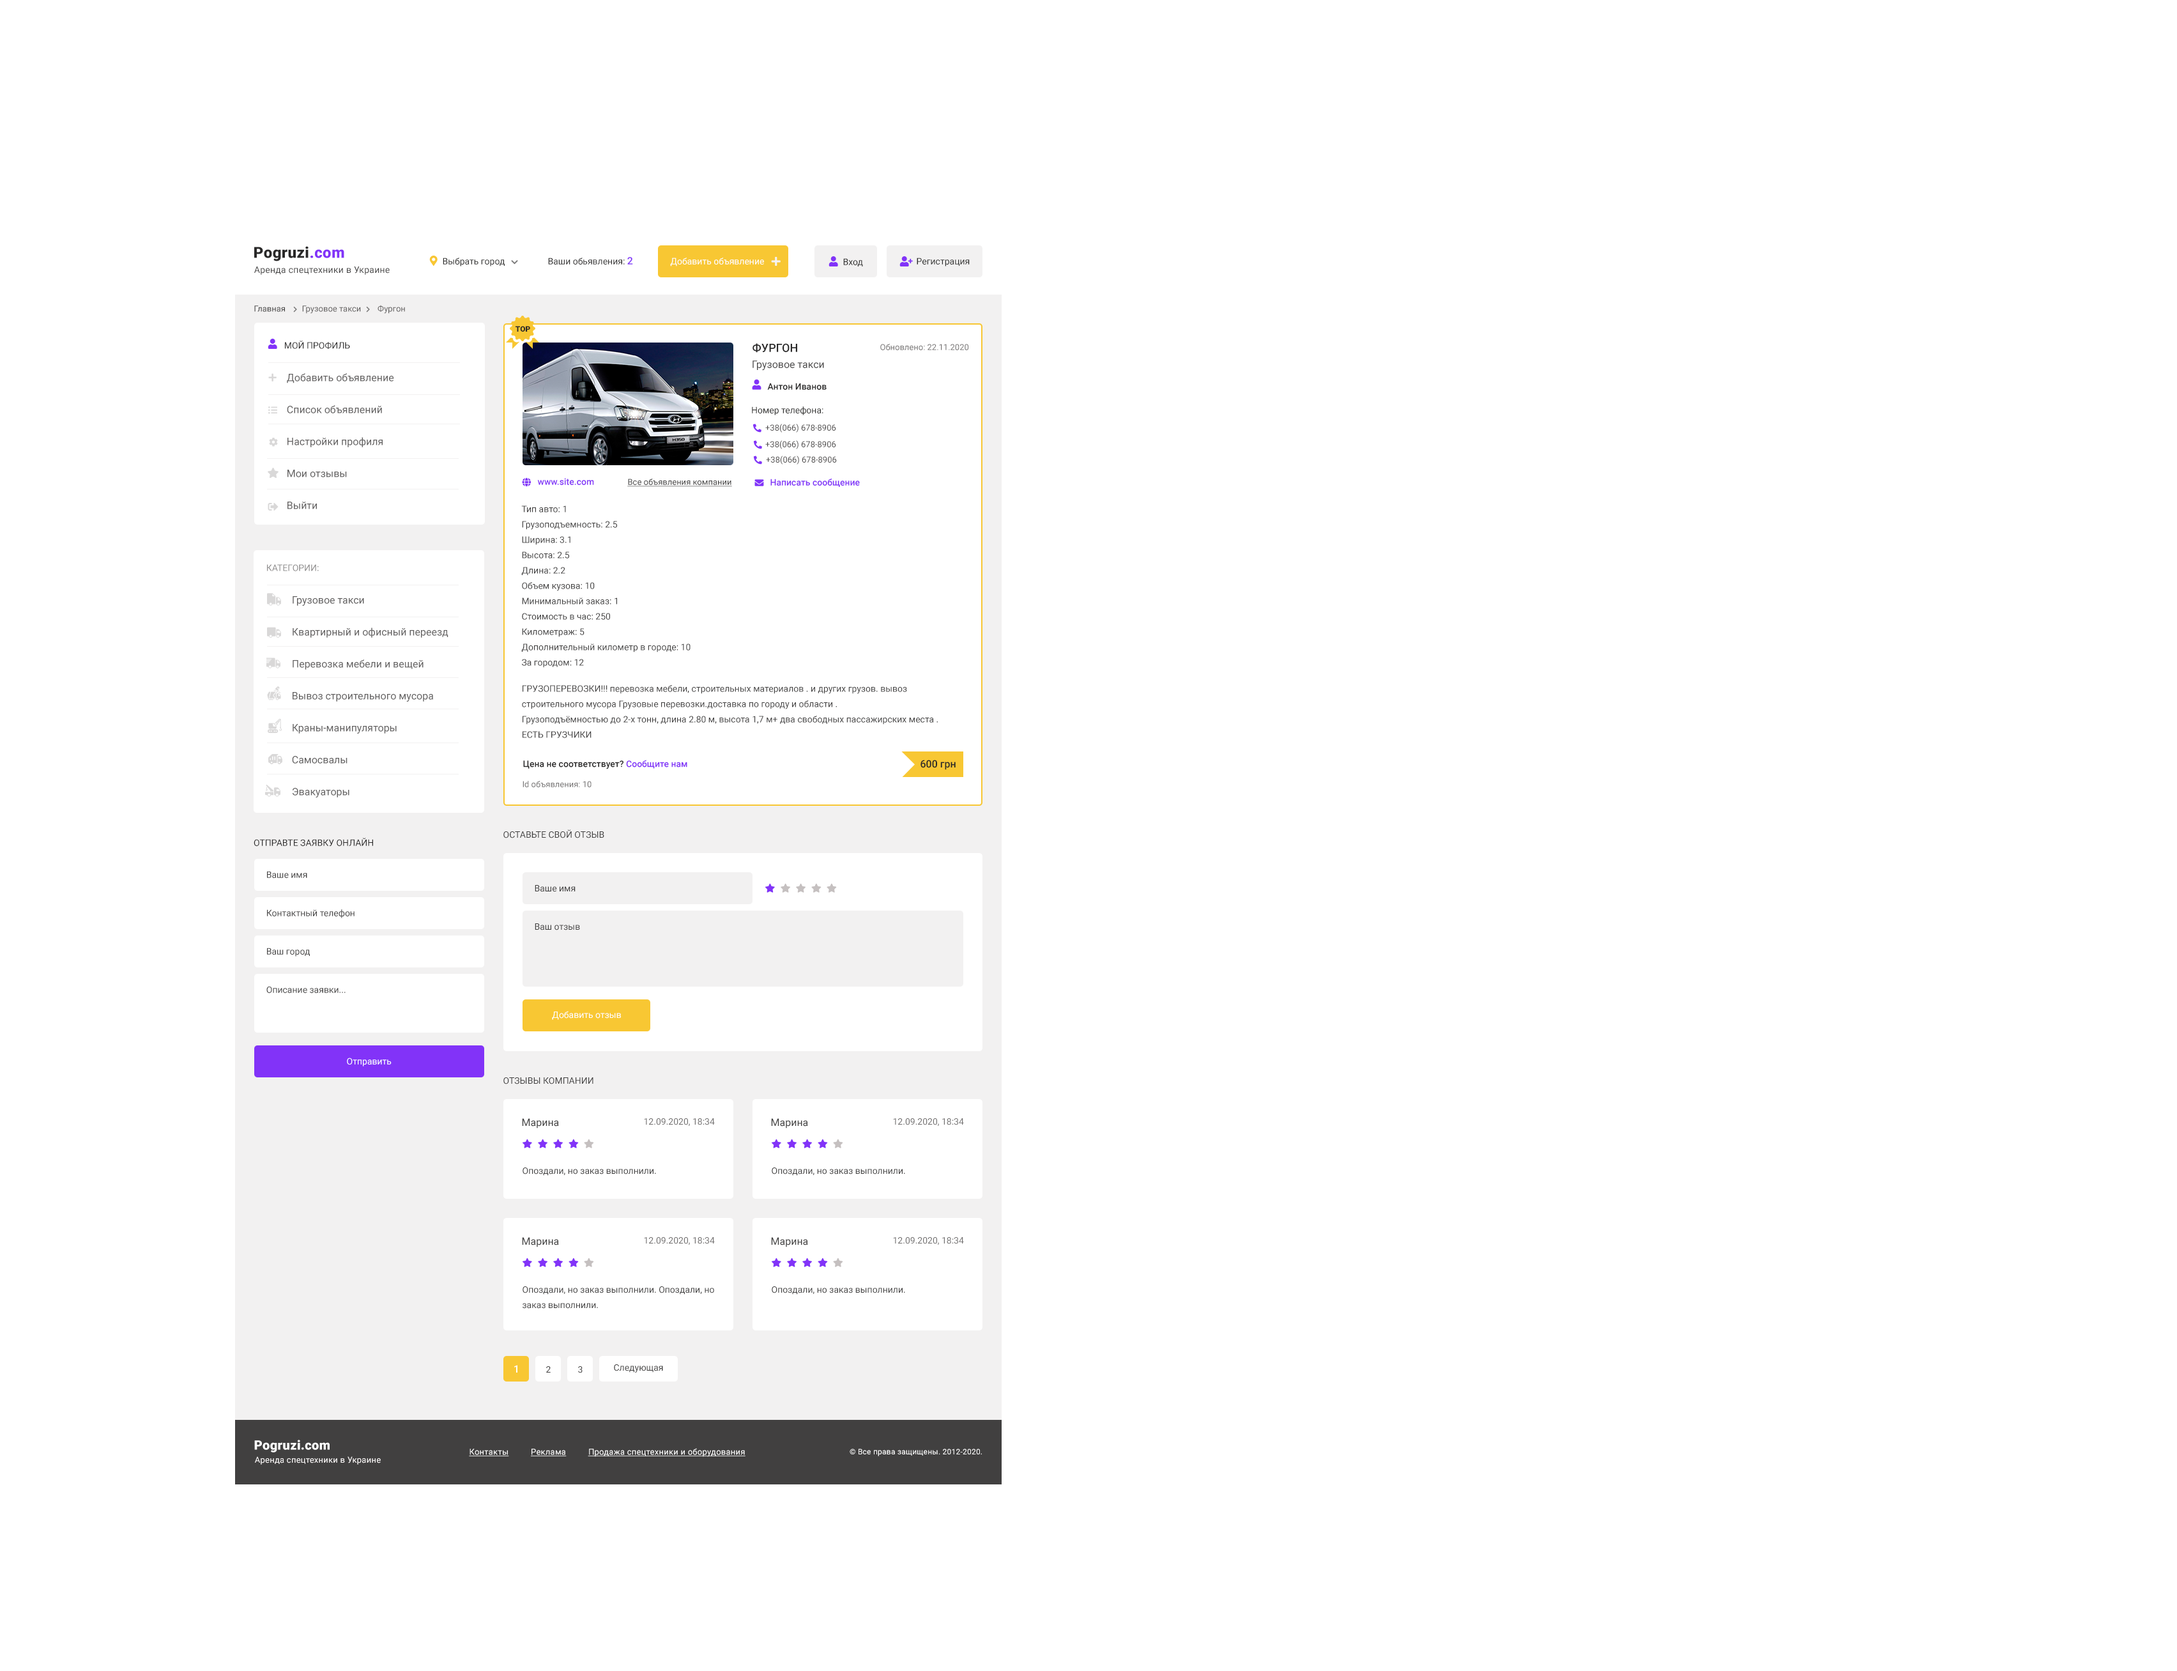
<style>
.page{position:relative;width:2177px;height:1671px;background:#ffffff}
.page>*{position:absolute;margin:0}
.t1{font:15.3px "Roboto-Black";letter-spacing:0.02em;color:#292828}
.t2{font:15.3px "Roboto-Black";letter-spacing:0.02em;color:#8233f8}
.t3{font:8.9px "Roboto-Regular";color:#2a2a29}
.t4{font:8.9px "Roboto-Regular";color:#2b2a2a}
.t5{font:10.2px "Roboto-Medium";color:#8233f8}
.t6{font:8.9px "Roboto-Regular";color:#ffffff}
.t7{font:8.9px "Roboto-Regular";letter-spacing:0.02em;color:#414040}
.t8{font:7.7px "Roboto-Black";color:#292828;text-transform:uppercase}
.t9{font:8.9px "Roboto-Regular";color:#292828;text-transform:uppercase}
.t10{font:11.5px "Roboto-Medium";color:#292828;text-transform:uppercase}
.t11{font:8.3px "Roboto-Regular";color:#757373}
.t12{font:10.2px "Roboto-Regular";color:#494848}
.t13{font:10.2px/31.9px "Roboto-Regular";color:#615f5f}
.t14{font:8.9px "Roboto-Medium";color:#292828}
.t15{font:8.3px "Roboto-Regular";color:#4f4d4d}
.t16{font:8.9px "Roboto-Medium";color:#8233f8}
.t17{font:8.3px "Roboto-Regular";color:#414040;text-decoration:underline}
.t18{font:8.9px/15.3px "Roboto-Regular";color:#403f3f}
.t19{font:8.9px "Roboto-Regular";color:#8c8a8a;text-transform:uppercase}
.t20{font:8.9px/15.3px "Roboto-Regular";color:#414040}
.t21{font:10.2px "Roboto-Medium";color:#292828}
.t22{font:8.9px "Roboto-Regular";color:#403f3f;text-transform:uppercase}
.t23{font:8.9px "Roboto-Regular";color:#414040}
.t24{font:8.9px "Roboto-Regular";color:#403f3f}
.t25{font:10.2px "Roboto-Regular";color:#403f3f}
.t26{font:8.9px "Roboto-Regular";color:#706e6e}
.t27{font:10.2px "Roboto-Medium";color:#ffffff}
.t28{font:12.8px "Roboto-Black";letter-spacing:0.02em;color:#ffffff}
.t29{font:8.3px "Roboto-Regular";letter-spacing:0.02em;color:#fdfafa}
.t30{font:8.3px "Roboto-Regular";letter-spacing:0.02em;color:#ffffff;text-decoration:underline}
.t31{font:7.7px "Roboto-Regular";letter-spacing:0.02em;color:#ffffff}
</style>
<div class="page">
<p class="t1" style="left:254px;top:246px;width:90px;height:15px">Pogruzi<span class="t2">.com</span></p>
<p class="t3" style="left:443px;top:257px;width:62px;height:9px">Выбрать город</p>
<p class="t4" style="left:548px;top:257px;width:85px;height:8px">Ваши обьявления: <span class="t5">2</span></p>
<p class="t6" style="left:670px;top:257px;width:94px;height:9px">Добавить объявление</p>
<p class="t3" style="left:917px;top:257px;width:53px;height:9px">Регистрация</p>
<p class="t7" style="left:254px;top:266px;width:136px;height:9px">Аренда спецтехники в Украине</p>
<p class="t3" style="left:843px;top:258px;width:20px;height:8px">Вход</p>
<p class="t8" style="left:516px;top:326px;width:14px;height:6px">Top</p>
<p class="t9" style="left:285px;top:341px;width:65px;height:8px">Мой профиль</p>
<p class="t10" style="left:753px;top:343px;width:44px;height:10px">Фургон</p>
<p class="t11" style="left:880px;top:344px;width:89px;height:6px">Обновлено: 22.11.2020</p>
<p class="t12" style="left:753px;top:360px;width:71px;height:11px">Грузовое такси</p>
<p class="t13" style="left:287px;top:373px;width:107px;height:136px">Добавить объявление<br>Список объявлений<br>Настройки профиля<br>Мои отзывы<br>Выйти</p>
<p class="t14" style="left:767px;top:383px;width:60px;height:7px">Антон Иванов</p>
<p class="t3" style="left:752px;top:406px;width:72px;height:9px">Номер телефона:</p>
<p class="t15" style="left:765px;top:424px;width:71px;height:9px">+38(066) 678-8906</p>
<p class="t15" style="left:765px;top:440px;width:71px;height:9px">+38(066) 678-8906</p>
<p class="t15" style="left:766px;top:456px;width:71px;height:9px">+38(066) 678-8906</p>
<p class="t16" style="left:537px;top:478px;width:57px;height:7px">www.site.com</p>
<p class="t17" style="left:627px;top:479px;width:105px;height:8px">Все объявления компании</p>
<p class="t16" style="left:771px;top:479px;width:89px;height:8px">Написать сообщение</p>
<p class="t18" style="left:521px;top:505px;width:170px;height:163px">Тип авто: 1<br>Грузоподъемность: 2.5<br>Ширина: 3.1<br>Высота: 2.5<br>Длина: 2.2<br>Объем кузова: 10<br>Минимальный заказ: 1<br>Стоимость в час: 250<br>Километраж: 5<br>Дополнительный километр в городе: 10<br>За городом: 12</p>
<p class="t19" style="left:267px;top:564px;width:52px;height:7px">Категории:</p>
<p class="t13" style="left:292px;top:596px;width:157px;height:201px">Грузовое такси<br>Квартирный и офисный переезд<br>Перевозка мебели и вещей<br>Вывоз строительного мусора<br>Краны-манипуляторы<br>Самосвалы<br>Эвакуаторы</p>
<p class="t20" style="left:522px;top:685px;width:416px;height:53px">ГРУЗОПЕРЕВОЗКИ!!! перевозка мебели, строительных материалов . и других грузов. вывоз строительного мусора Грузовые перевозки.доставка по городу и области .<br>Грузоподъёмностью до 2-х тонн, длина 2.80 м, высота 1,7 м+ два свободных пассажирских места . ЕСТЬ ГРУЗЧИКИ</p>
<p class="t14" style="left:523px;top:760px;width:164px;height:9px">Цена не соответствует? <span class="t16">Сообщите нам</span></p>
<p class="t21" style="left:921px;top:760px;width:35px;height:10px">600 грн</p>
<p class="t11" style="left:523px;top:781px;width:69px;height:6px">Id объявления: 10</p>
<p class="t22" style="left:503px;top:829px;width:101px;height:9px">Оставьте свой отзыв</p>
<p class="t9" style="left:254px;top:838px;width:119px;height:8px">отправте заявку онлайн</p>
<p class="t23" style="left:267px;top:871px;width:40px;height:7px">Ваше имя</p>
<p class="t24" style="left:535px;top:885px;width:41px;height:7px">Ваше имя</p>
<p class="t23" style="left:267px;top:909px;width:88px;height:9px">Контактный телефон</p>
<p class="t24" style="left:535px;top:923px;width:45px;height:7px">Ваш отзыв</p>
<p class="t23" style="left:267px;top:948px;width:43px;height:8px">Ваш город</p>
<p class="t23" style="left:266px;top:986px;width:80px;height:7px">Описание заявки...</p>
<p class="t6" style="left:552px;top:1011px;width:69px;height:9px">Добавить отзыв</p>
<p class="t6" style="left:347px;top:1057px;width:45px;height:9px">Отправить</p>
<p class="t22" style="left:503px;top:1077px;width:91px;height:7px">отзывы компании</p>
<p class="t25" style="left:522px;top:1118px;width:37px;height:10px">Марина</p>
<p class="t26" style="left:644px;top:1118px;width:71px;height:8px">12.09.2020, 18:34</p>
<p class="t25" style="left:771px;top:1118px;width:37px;height:10px">Марина</p>
<p class="t26" style="left:893px;top:1118px;width:71px;height:8px">12.09.2020, 18:34</p>
<p class="t24" style="left:523px;top:1167px;width:133px;height:9px">Опоздали, но заказ выполнили.</p>
<p class="t24" style="left:772px;top:1167px;width:133px;height:9px">Опоздали, но заказ выполнили.</p>
<p class="t25" style="left:522px;top:1237px;width:37px;height:10px">Марина</p>
<p class="t26" style="left:644px;top:1237px;width:71px;height:8px">12.09.2020, 18:34</p>
<p class="t25" style="left:771px;top:1237px;width:37px;height:10px">Марина</p>
<p class="t26" style="left:893px;top:1237px;width:71px;height:8px">12.09.2020, 18:34</p>
<p class="t18" style="left:523px;top:1286px;width:191px;height:23px">Опоздали, но заказ выполнили. Опоздали, но<br>заказ выполнили.</p>
<p class="t24" style="left:772px;top:1286px;width:133px;height:8px">Опоздали, но заказ выполнили.</p>
<p class="t27" style="left:514px;top:1365px;width:4px;height:7px">1</p>
<p class="t23" style="left:546px;top:1366px;width:5px;height:6px">2</p>
<p class="t23" style="left:578px;top:1366px;width:5px;height:7px">3</p>
<p class="t23" style="left:614px;top:1364px;width:49px;height:8px">Следующая</p>
<p class="t28" style="left:254px;top:1440px;width:76px;height:12px">Pogruzi.com</p>
<p class="t29" style="left:255px;top:1456px;width:126px;height:8px">Аренда спецтехники в Украине</p>
<p class="t30" style="left:469px;top:1448px;width:277px;height:9px">Контакты          Реклама          Продажа спецтехники и оборудования</p>
<p class="t31" style="left:850px;top:1448px;width:132px;height:8px">© Все права защищены. 2012-2020.</p>
</div>
